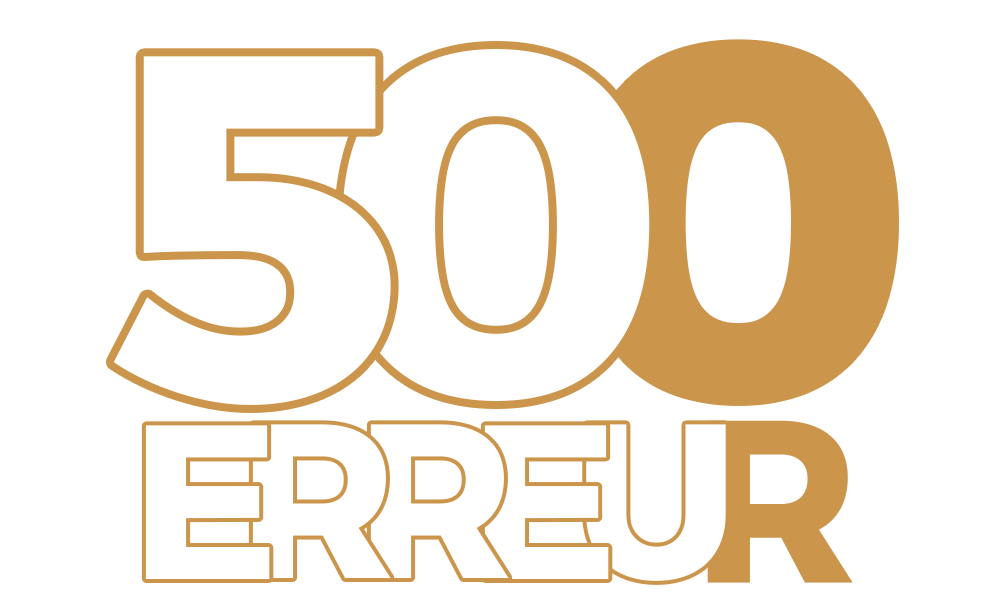
<style>
.page{position:relative;width:1000px;height:600px;background:#ffffff}
.page>*{position:absolute;margin:0}
.t1{font:493.6px "Montserrat-Bold";color:#ffffff}
.t2{font:491.7px "Montserrat-Bold";color:#cc954c}
.t3{font:491.7px "Montserrat-Bold";color:#ffffff}
.t4{font:219.1px "Montserrat-Bold";letter-spacing:-0.15em;color:#ffffff}
.t5{font:230.7px "Montserrat-Bold";color:#cc954c}
</style>
<div class="page">
<p class="t1" style="left:342px;top:49px;width:308px;height:352px">0</p>
<p class="t2" style="left:585px;top:47px;width:306px;height:351px">0</p>
<p class="t3" style="left:113px;top:56px;width:278px;height:349px">5</p>
<p class="t4" style="left:145px;top:425px;width:125px;height:154px">E</p>
<p class="t4" style="left:252px;top:424px;width:139px;height:154px">R</p>
<p class="t4" style="left:370px;top:424px;width:139px;height:154px">R</p>
<p class="t4" style="left:484px;top:425px;width:125px;height:154px">E</p>
<p class="t5" style="left:707px;top:420px;width:146px;height:163px">R</p>
</div>
